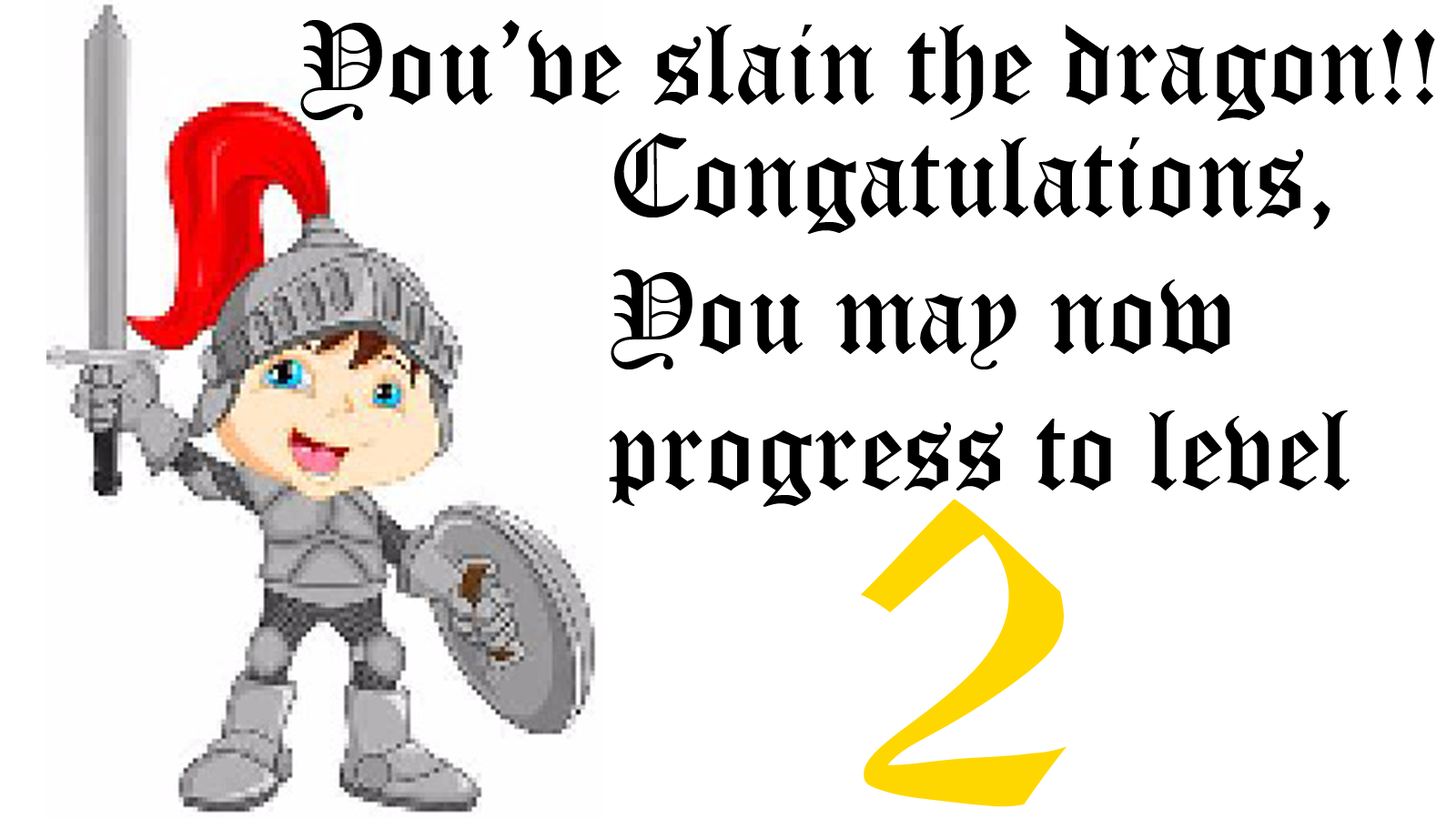
<style>
.page{position:relative;width:1456px;height:819px;background:#ffffff}
.page>*{position:absolute;margin:0}
.t1{font:113.7px "OldEnglishTextMT";color:#000000}
.t2{font:318.5px "OldEnglishTextMT";color:#ffd700}
</style>
<div class="page">
<p class="t1" style="left:300px;top:20px;width:1135px;height:101px">You’ve slain the dragon!!</p>
<p class="t1" style="left:609px;top:133px;width:741px;height:374px">Congatulations,<br>You may now<br>progress to level</p>
<p class="t2" style="left:861px;top:499px;width:206px;height:308px">2</p>
</div>
